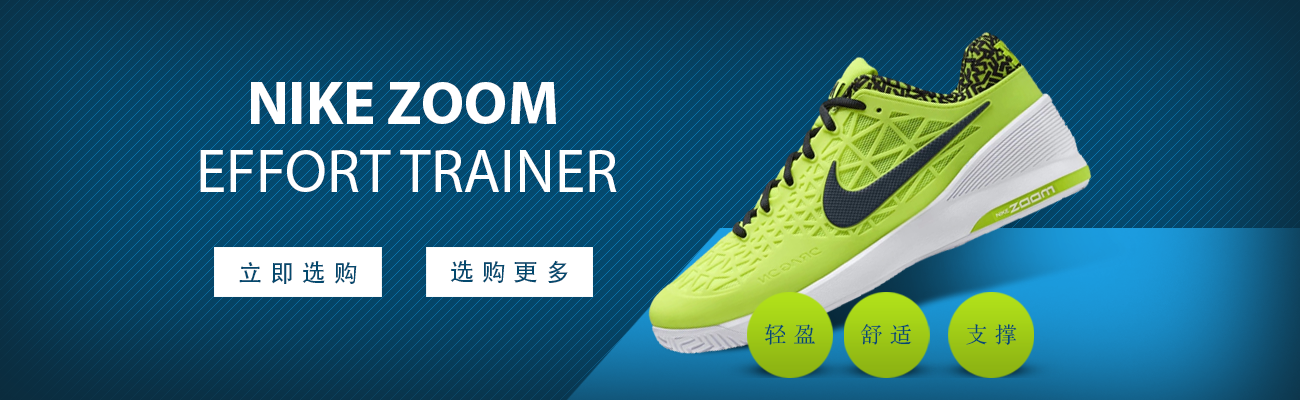
<style>
.page{position:relative;width:1300px;height:400px}
.page>*{position:absolute;margin:0}
.t1{font:60.6px "MyriadPro-Bold";color:#ffffff;text-transform:uppercase}
.t2{font:60.6px "MyriadPro-Regular";color:#ffffff;text-transform:uppercase}
.t3{font:24.2px "AdobeHeitiStd-Regular";letter-spacing:0.32em;color:#04496e}
.t4{font:22.4px "STSongti-SC-Regular";letter-spacing:0.32em;color:#04496e}
</style>
<div class="page">
<p class="t1" style="left:251px;top:82px;width:305px;height:42px">NIKE zoom</p>
<p class="t2" style="left:200px;top:150px;width:417px;height:42px">effort trainer</p>
<p class="t3" style="left:239px;top:261px;width:118px;height:23px">立即选购</p>
<p class="t3" style="left:450px;top:260px;width:118px;height:23px">选购更多</p>
<p class="t4" style="left:764px;top:324px;width:51px;height:21px">轻盈</p>
<p class="t4" style="left:861px;top:324px;width:51px;height:21px">舒适</p>
<p class="t4" style="left:966px;top:324px;width:51px;height:21px">支撑</p>
</div>
